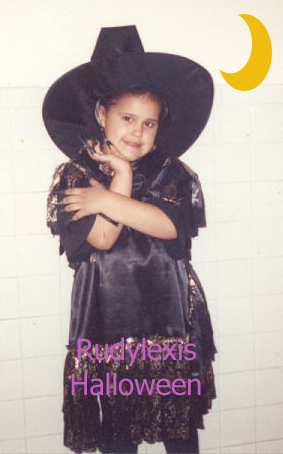
<style>
.page{position:relative;width:283px;height:454px}
.page>*{position:absolute;margin:0}
.t1{font:29.2px "Tahoma";color:#c45fc3}
</style>
<div class="page">
<p class="t1" style="left:71px;top:337px;width:130px;height:59px;text-align:center">Rudylexis Halloween</p>
</div>
